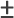
<style>
.page{position:relative;width:14px;height:18px;background:#ffffff}
.page>*{position:absolute;margin:0}
.t1{font:30px "Calibri";color:#3c3c3c}
</style>
<div class="page">
<p class="t1" style="left:0px;top:0px;width:14px;height:18px">±</p>
</div>
